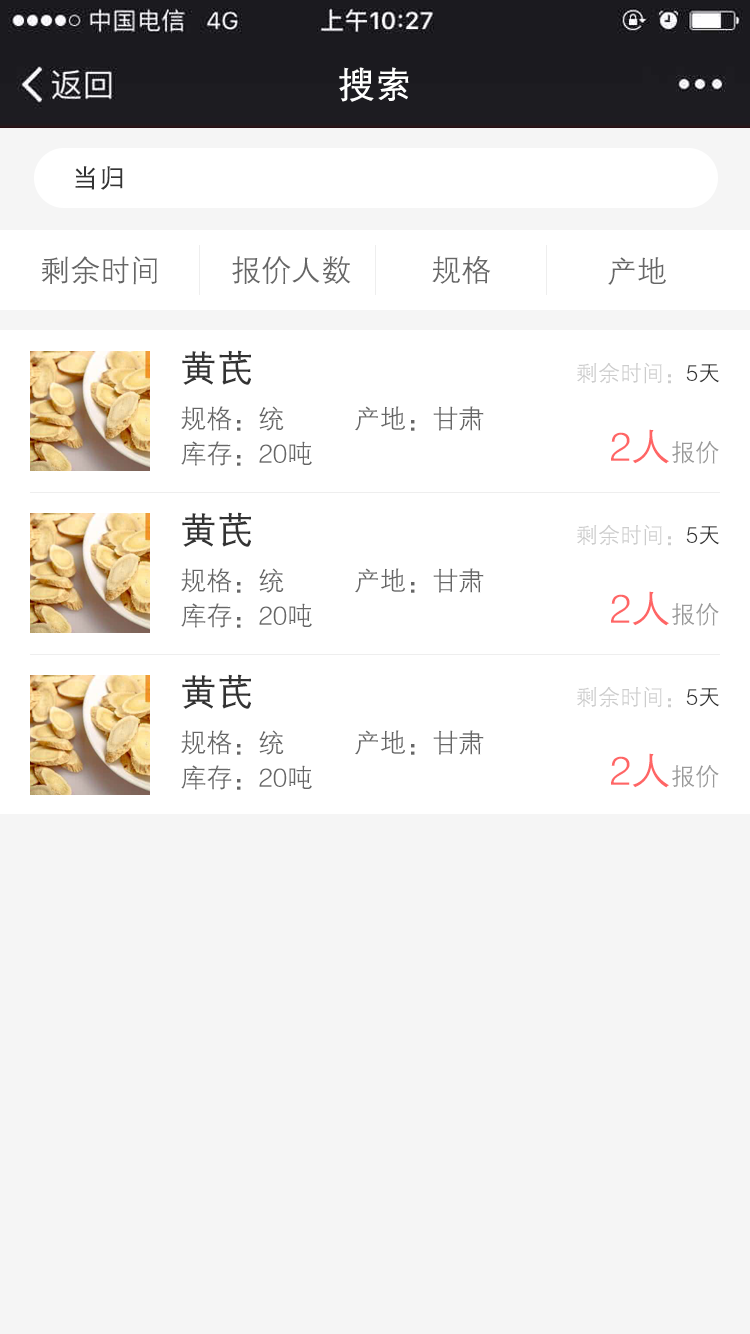
<style>
.page{position:relative;width:750px;height:1334px;background:#f5f5f5}
.page>*{position:absolute;margin:0}
.t1{font:36px "FZZDXJW--GB1-0";color:#ffffff;font-weight:bold}
.t2{font:26px "FZZDXJW--GB1-0";color:#333333;font-weight:bold}
.t3{font:30px "FZZDXJW--GB1-0";color:#666666}
.t4{font:36px "FZZDXJW--GB1-0";color:#333333;font-weight:bold}
.t5{font:22px "FZZDXJW--GB1-0";color:#cccccc}
.t6{font:22px "FZZDXJW--GB1-0";color:#333333}
.t7{font:26px "FZZDXJW--GB1-0";color:#666666}
.t8{font:40px "FZZDXJW--GB1-0";color:#ff6565}
.t9{font:24px "FZZDXJW--GB1-0";color:#999999}
</style>
<div class="page">
<p class="t1" style="left:339px;top:67px;width:70px;height:35px">搜索</p>
<p class="t2" style="left:75px;top:166px;width:48px;height:24px">当归</p>
<p class="t3" style="left:41px;top:256px;width:116px;height:29px">剩余时间</p>
<p class="t3" style="left:232px;top:256px;width:119px;height:28px">报价人数</p>
<p class="t3" style="left:432px;top:256px;width:59px;height:28px">规格</p>
<p class="t3" style="left:608px;top:257px;width:58px;height:28px">产地</p>
<p class="t4" style="left:182px;top:350px;width:69px;height:35px">黄芪</p>
<p class="t5" style="left:577px;top:362px;width:143px;height:22px">剩余时间：<span class="t6">5天</span></p>
<p class="t7" style="left:181px;top:406px;width:103px;height:25px">规格：统</p>
<p class="t7" style="left:355px;top:406px;width:129px;height:25px">产地：甘肃</p>
<p class="t8" style="left:611px;top:429px;width:108px;height:35px">2人<span class="t9">报价</span></p>
<p class="t7" style="left:181px;top:441px;width:131px;height:25px">库存：20吨</p>
<p class="t4" style="left:182px;top:512px;width:69px;height:35px">黄芪</p>
<p class="t5" style="left:577px;top:524px;width:143px;height:22px">剩余时间：<span class="t6">5天</span></p>
<p class="t7" style="left:181px;top:568px;width:103px;height:25px">规格：统</p>
<p class="t7" style="left:355px;top:568px;width:129px;height:25px">产地：甘肃</p>
<p class="t8" style="left:611px;top:591px;width:108px;height:35px">2人<span class="t9">报价</span></p>
<p class="t7" style="left:181px;top:603px;width:131px;height:25px">库存：20吨</p>
<p class="t4" style="left:182px;top:674px;width:69px;height:35px">黄芪</p>
<p class="t5" style="left:577px;top:686px;width:143px;height:22px">剩余时间：<span class="t6">5天</span></p>
<p class="t7" style="left:181px;top:730px;width:103px;height:25px">规格：统</p>
<p class="t7" style="left:355px;top:730px;width:129px;height:25px">产地：甘肃</p>
<p class="t8" style="left:611px;top:753px;width:108px;height:35px">2人<span class="t9">报价</span></p>
<p class="t7" style="left:181px;top:765px;width:131px;height:25px">库存：20吨</p>
</div>
